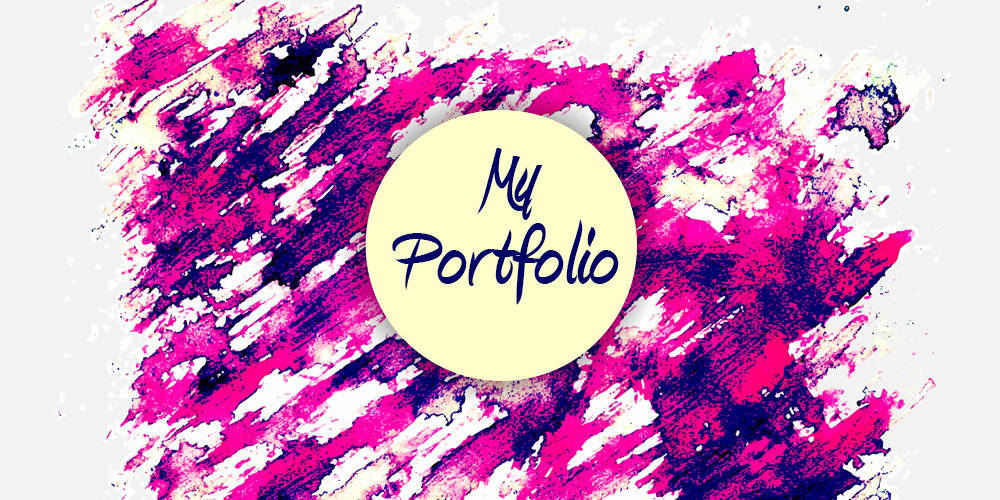
<style>
.page{position:relative;width:1000px;height:500px;background:#f2f2f2}
.page>*{position:absolute;margin:0}
.t1{font:100px/83.3px "Amienne-Bold";color:#000066}
</style>
<div class="page">
<p class="t1" style="left:392px;top:148px;width:227px;height:157px;text-align:center">My<br>Portfolio</p>
</div>
